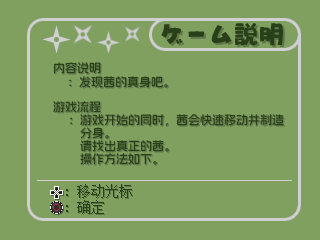
<style>
.page{position:relative;width:320px;height:240px;background:#80a060}
.page>*{position:absolute;margin:0}
.t1{font:12px "AlimamaFangYuanTiVF-SemiBold";color:#284018}
.t2{font:12px/13px "AlimamaFangYuanTiVF-SemiBold";color:#284018}
.t3{font:14px "SimSun";color:#284018}
</style>
<div class="page">
<p class="t1" style="left:53px;top:62px;width:48px;height:12px">内容说明</p>
<p class="t1" style="left:69px;top:76px;width:99px;height:12px">：发现茜的真身吧。</p>
<p class="t1" style="left:53px;top:101px;width:48px;height:12px">游戏流程</p>
<p class="t2" style="left:70px;top:114px;width:214px;height:51px">：游戏开始的同时，茜会快速移动并制造　分身。<br>　请找出真正的茜。<br>　操作方法如下。</p>
<p class="t3" style="left:77px;top:184px;width:55px;height:14px">移动光标</p>
<p class="t3" style="left:77px;top:200px;width:27px;height:14px">确定</p>
</div>
